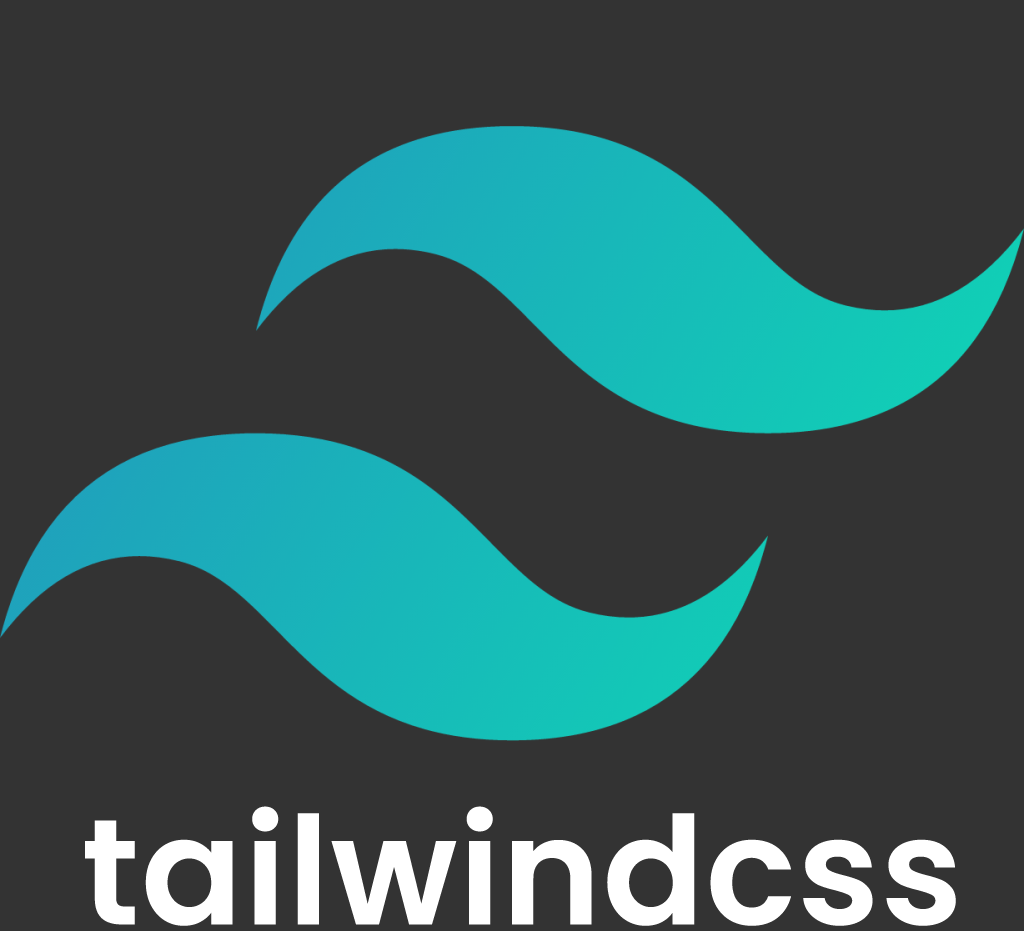
<style>
.page{position:relative;width:1024px;height:931px;background:#333333}
.page>*{position:absolute;margin:0}
.t1{font:150px "Poppins-SemiBold";letter-spacing:0.01em;color:#ffffff}
</style>
<div class="page">
<p class="t1" style="left:85px;top:806px;width:871px;height:120px">tailwindcss</p>
</div>
